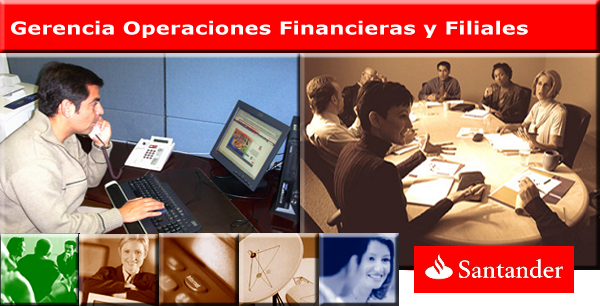
<style>
.page{position:relative;width:600px;height:306px}
.page>*{position:absolute;margin:0}
.t1{font:18px "Verdana-Bold";color:#ffffff;scale:1.19 1}
</style>
<div class="page">
<p class="t1" style="left:11px;top:20px;width:517px;height:18px">Gerencia Operaciones Financieras y Filiales</p>
</div>
